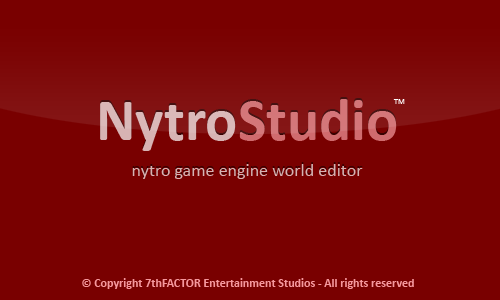
<style>
.page{position:relative;width:500px;height:300px;background:#790000}
.page>*{position:absolute;margin:0}
.t1{font:18px "Calibri"}
.t2{font:60px "Calibri-Bold"}
.t3{font:8.4px "Calibri";color:#ffffff}
.t4{font:12px "Calibri-Bold";color:#f5989d}
</style>
<div class="page">
<p class="t1" style="left:100px;top:99px;width:297px;height:80px;text-align:center"><span class="t2">Nytro</span><span class="t2">Studio<br> <br></span>nytro game engine world editor</p>
<p class="t3" style="left:393px;top:99px;width:12px;height:5px">TM</p>
<p class="t4" style="left:82px;top:278px;width:332px;height:11px">© Copyright 7thFACTOR Entertainment Studios - All rights reserved</p>
</div>
